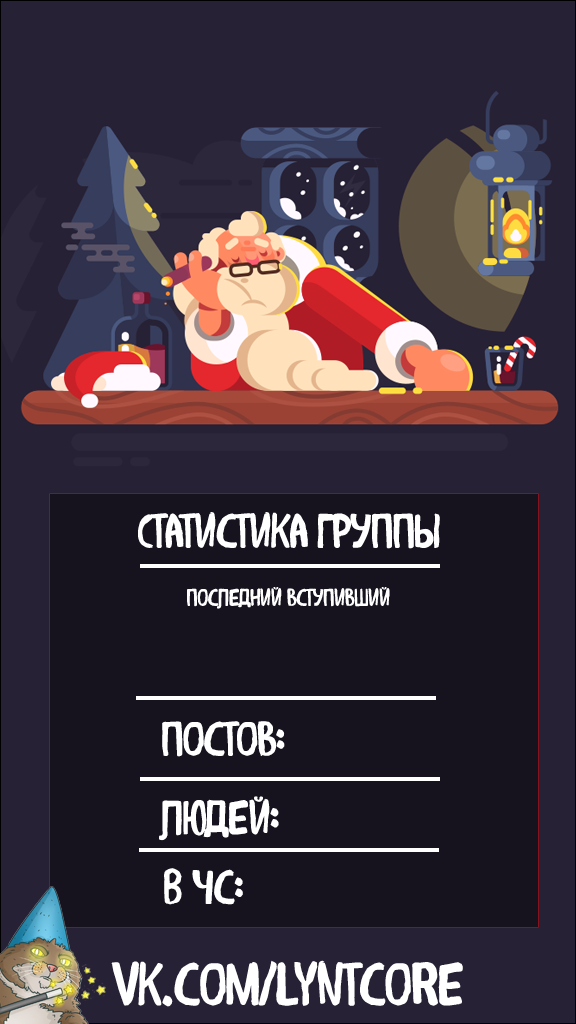
<style>
.page{position:relative;width:576px;height:1024px;background:#272135}
.page>*{position:absolute;margin:0}
.t1{font:48px "ALBOROTO";letter-spacing:-0.035em;color:#ffffff}
.t2{font:24px "ALBOROTO";letter-spacing:-0.035em;color:#ffffff}
.t3{font:60px "ALBOROTO";letter-spacing:-0.035em;color:#ffffff}
</style>
<div class="page">
<p class="t1" style="left:138px;top:512px;width:302px;height:37px">Статистика группы</p>
<p class="t2" style="left:187px;top:587px;width:203px;height:22px">последний вступивший</p>
<p class="t1" style="left:162px;top:721px;width:123px;height:36px">Постов:</p>
<p class="t1" style="left:159px;top:796px;width:120px;height:45px">Людей:</p>
<p class="t1" style="left:164px;top:868px;width:79px;height:37px">В чс:</p>
<p class="t3" style="left:111px;top:960px;width:352px;height:47px">vk.com/lyntcore</p>
</div>
